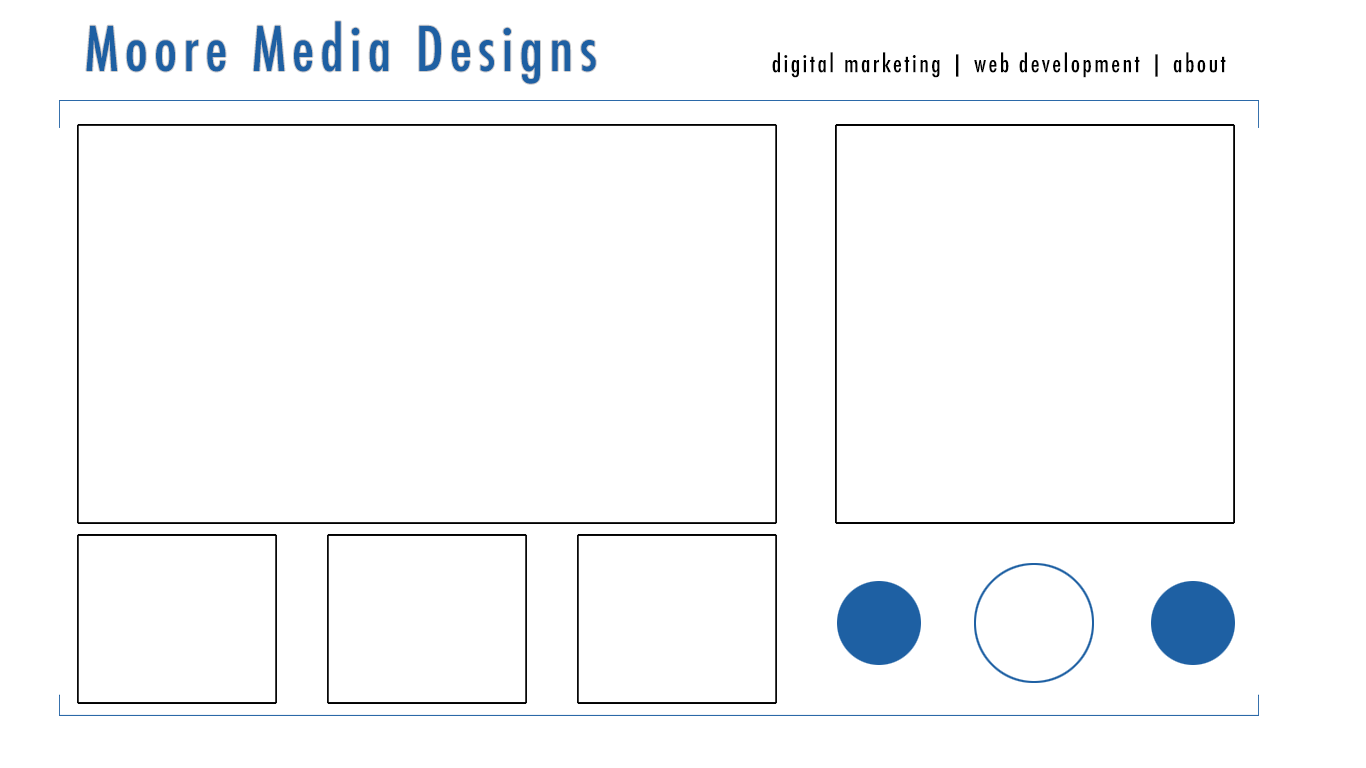
<style>
.page{position:relative;width:1366px;height:768px;background:#ffffff}
.page>*{position:absolute;margin:0}
.t1{font:60px "Futura-CondensedMedium";letter-spacing:0.1em;color:#1e60a3}
.t2{font:24px "Futura-CondensedMedium";letter-spacing:0.1em;color:#000000}
</style>
<div class="page">
<p class="t1" style="left:86px;top:21px;width:510px;height:63px">Moore Media Designs</p>
<p class="t2" style="left:772px;top:52px;width:454px;height:26px">digital marketing | web development | about</p>
</div>
